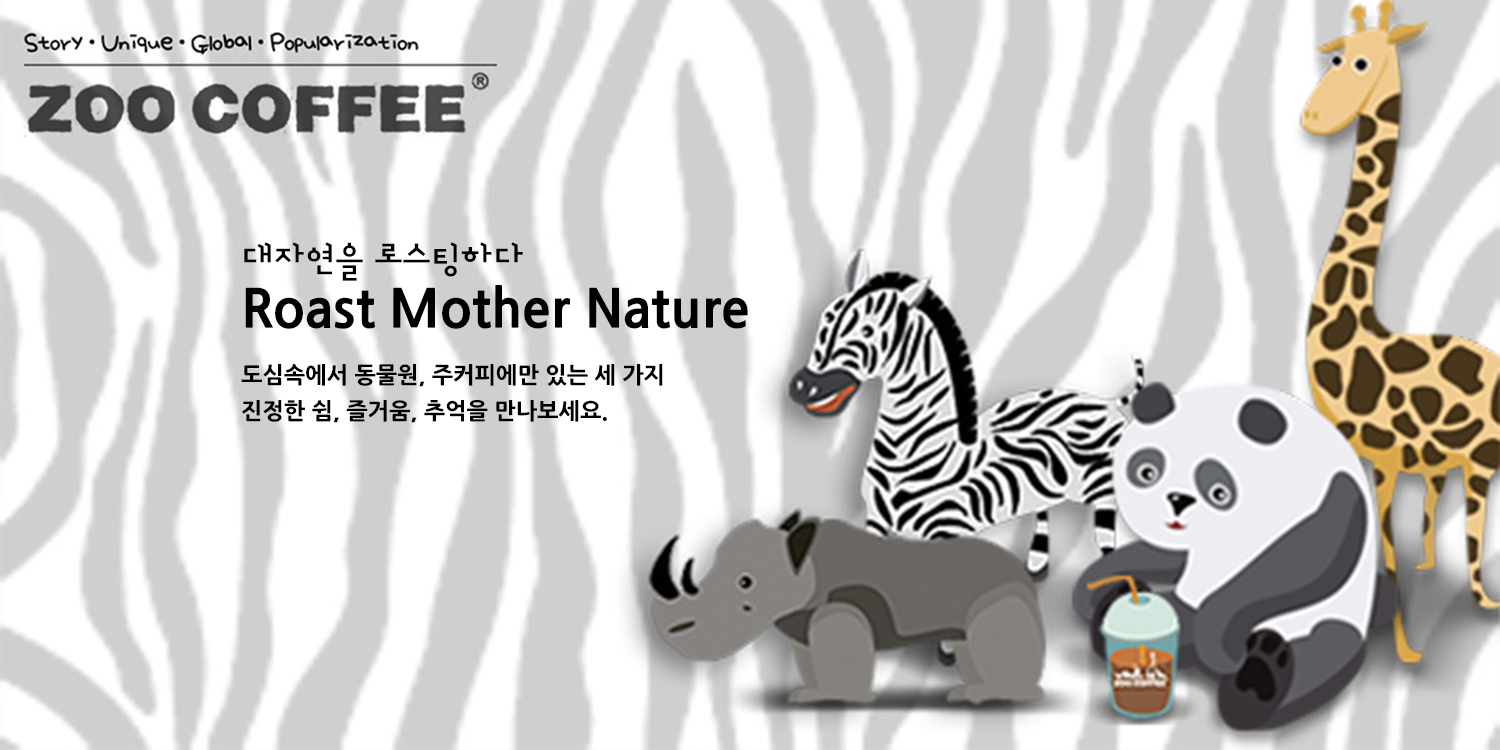
<style>
.page{position:relative;width:1500px;height:750px;background:#cfcfcf}
.page>*{position:absolute;margin:0}
.t1{font:35px "designhouseBold";color:#000000}
.t2{font:52px "NanumGothicExtraBold";color:#000000}
.t3{font:22.5px/36px "NanumGothicExtraBold";color:#000000}
</style>
<div class="page">
<p class="t1" style="left:244px;top:242px;width:279px;height:39px">대자연을 로스팅하다</p>
<p class="t2" style="left:245px;top:285px;width:503px;height:44px">Roast Mother Nature</p>
<p class="t3" style="left:241px;top:364px;width:422px;height:59px">도심속에서 동물원, 주커피에만 있는 세 가지<br>진정한 쉼, 즐거움, 추억을 만나보세요.</p>
</div>
